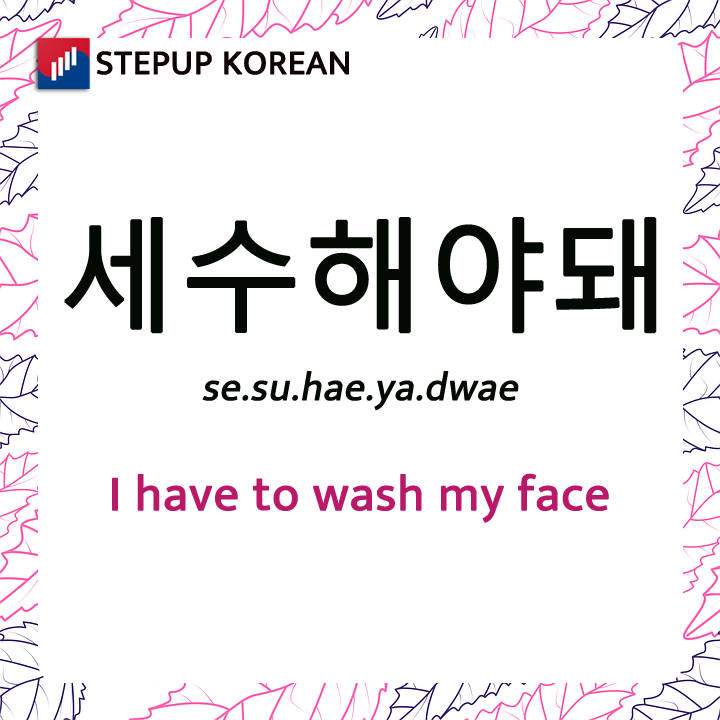
<style>
.page{position:relative;width:720px;height:720px;background:#ffffff}
.page>*{position:absolute;margin:0}
.t1{font:35px "Mukta-Regular";color:#0e0202;font-weight:bold}
.t2{font:120px "MalgunGothic";color:#030a03;font-weight:bold}
.t3{font:40px "Mukta-Regular";color:#030a03;font-weight:bold;font-style:italic}
.t4{font:50px "Mukta-Regular";color:#b91968;font-weight:bold}
</style>
<div class="page">
<p class="t1" style="left:96px;top:51px;width:253px;height:24px">STEPUP KOREAN</p>
<p class="t2" style="left:64px;top:217px;width:593px;height:117px">세수해야돼</p>
<p class="t3" style="left:202px;top:371px;width:317px;height:40px">se.su.hae.ya.dwae</p>
<p class="t4" style="left:112px;top:473px;width:497px;height:50px">I have to wash my face</p>
</div>
